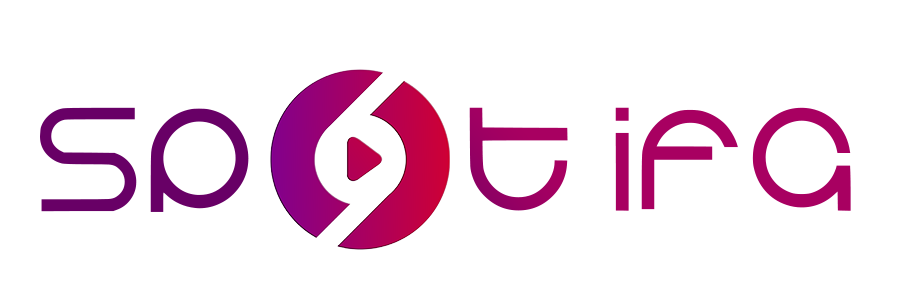
<style>
.page{position:relative;width:900px;height:300px;background:#ffffff}
.page>*{position:absolute;margin:0}
.t1{font:141.1px "Bluerabbit-Regular"}
</style>
<div class="page">
<p class="t1" style="left:40px;top:107px;width:811px;height:105px">Sp      T IFA</p>
</div>
